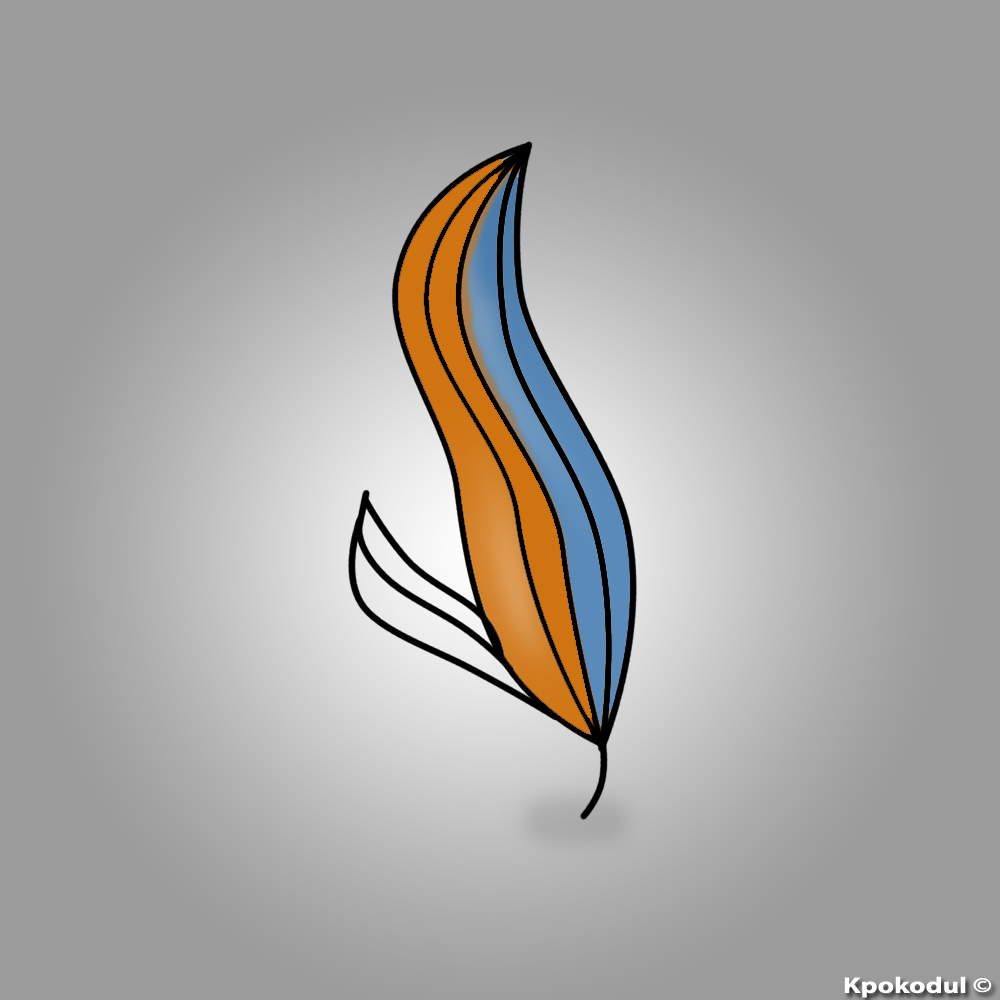
<style>
.page{position:relative;width:1000px;height:1000px;background:#9b9b9b}
.page>*{position:absolute;margin:0}
.t1{font:22.6px "MyriadPro-Bold";color:#fefefe;scale:1.26 1}
</style>
<div class="page">
<p class="t1" style="left:844px;top:976px;width:148px;height:22px">Kpokodul ©</p>
</div>
